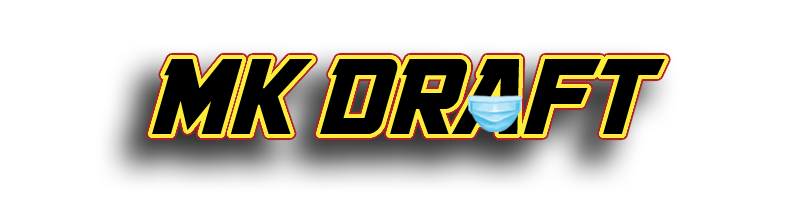
<style>
.page{position:relative;width:800px;height:200px;background:#ffffff}
.page>*{position:absolute;margin:0}
.t1{font:112px "GovernmentAgentBB-Italic";color:#000000}
</style>
<div class="page">
<p class="t1" style="left:152px;top:59px;width:513px;height:75px">MK DRAFT</p>
</div>
